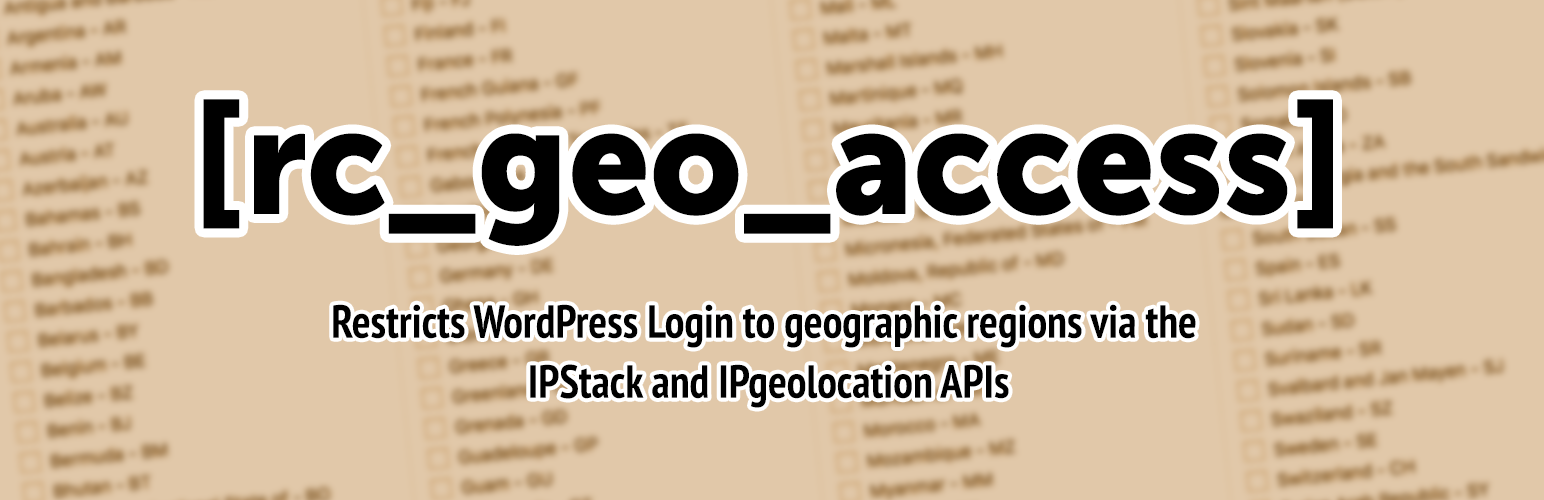
<style>
.page{position:relative;width:1544px;height:500px;background:#e1c8a9}
.page>*{position:absolute;margin:0}
.t1{font:152.6px "MuseoSans-900";color:#000000;scale:0.95 1}
.t2{font:46.5px/60px "PTSans-NarrowBold";color:#000000;scale:0.95 1}
</style>
<div class="page">
<p class="t1" style="left:203px;top:99px;width:1130px;height:147px">[rc_geo_access]</p>
<p class="t2" style="left:333px;top:304px;width:863px;height:104px;text-align:center">Restricts WordPress Login to geographic regions via the <br>IPStack and IPgeolocation APIs</p>
</div>
